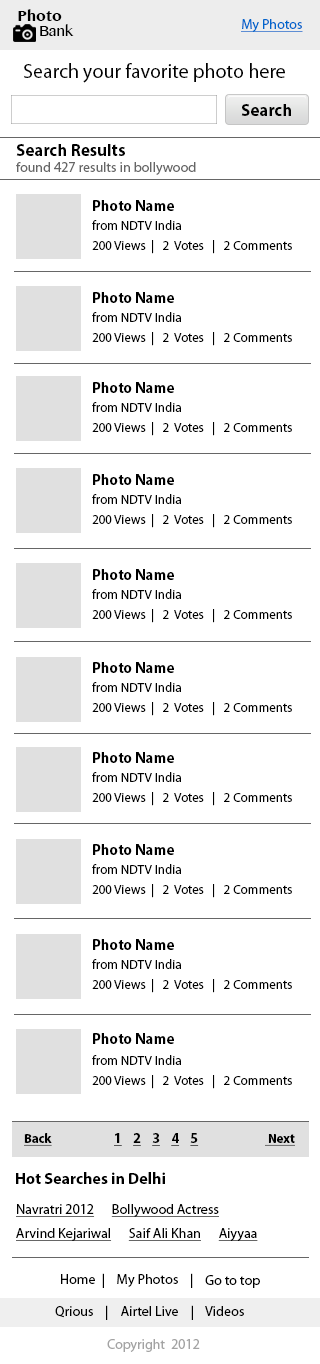
<style>
.page{position:relative;width:320px;height:1364px;background:#ffffff}
.page>*{position:absolute;margin:0}
.t1{font:14.7px/15.5px "TamilMN-Bold";color:#000000}
.t2{font:14.7px/15.5px "TamilMN";color:#000000}
.t3{font:14px "MyriadPro-Regular";color:#0066cc;text-decoration:underline}
.t4{font:20px "MyriadPro-Regular";color:#000000}
.t5{font:17px "MyriadPro-Bold";color:#000000}
.t6{font:14px/16px "MyriadPro-Regular";color:#666666}
.t7{font:17px/20px "MyriadPro-Bold";color:#000000}
.t8{font:15px "MyriadPro-Bold";color:#000000}
.t9{font:13px/20px "MyriadPro-Regular";color:#000000}
.t10{font:13px "MyriadPro-Bold";color:#000000;text-decoration:underline}
.t11{font:14px "MyriadPro-Bold";color:#000000;text-decoration:underline}
.t12{font:16px "MyriadPro-Bold";color:#000000}
.t13{font:14px/24px "MyriadPro-Regular";color:#000000;text-decoration:underline}
.t14{font:14px "MyriadPro-Regular";color:#000000}
.t15{font:14px "MyriadPro-Regular";color:#a3a3a3}
</style>
<div class="page">
<p class="t1" style="left:18px;top:9px;width:56px;height:27px">Photo<br><span class="t2">     Bank</span></p>
<p class="t3" style="left:241px;top:19px;width:62px;height:13px">My Photos</p>
<p class="t4" style="left:24px;top:63px;width:261px;height:20px">Search your favorite photo here</p>
<p class="t5" style="left:241px;top:104px;width:50px;height:12px">Search</p>
<p class="t6" style="left:16px;top:144px;width:180px;height:31px"><span class="t7">Search Results <br></span>found 427 results in bollywood</p>
<p class="t8" style="left:93px;top:200px;width:81px;height:11px">Photo Name</p>
<p class="t9" style="left:92px;top:220px;width:200px;height:34px">from NDTV India<br>200 Views  |   2  Votes   |   2 Comments</p>
<p class="t8" style="left:93px;top:292px;width:81px;height:11px">Photo Name</p>
<p class="t9" style="left:92px;top:312px;width:200px;height:34px">from NDTV India<br>200 Views  |   2  Votes   |   2 Comments</p>
<p class="t8" style="left:93px;top:382px;width:81px;height:11px">Photo Name</p>
<p class="t9" style="left:92px;top:402px;width:200px;height:34px">from NDTV India<br>200 Views  |   2  Votes   |   2 Comments</p>
<p class="t8" style="left:93px;top:474px;width:81px;height:11px">Photo Name</p>
<p class="t9" style="left:92px;top:494px;width:200px;height:34px">from NDTV India<br>200 Views  |   2  Votes   |   2 Comments</p>
<p class="t8" style="left:93px;top:569px;width:81px;height:11px">Photo Name</p>
<p class="t9" style="left:92px;top:589px;width:200px;height:34px">from NDTV India<br>200 Views  |   2  Votes   |   2 Comments</p>
<p class="t8" style="left:93px;top:662px;width:81px;height:11px">Photo Name</p>
<p class="t9" style="left:92px;top:682px;width:200px;height:34px">from NDTV India<br>200 Views  |   2  Votes   |   2 Comments</p>
<p class="t8" style="left:93px;top:752px;width:81px;height:11px">Photo Name</p>
<p class="t9" style="left:92px;top:772px;width:200px;height:34px">from NDTV India<br>200 Views  |   2  Votes   |   2 Comments</p>
<p class="t8" style="left:93px;top:844px;width:81px;height:11px">Photo Name</p>
<p class="t9" style="left:92px;top:864px;width:200px;height:34px">from NDTV India<br>200 Views  |   2  Votes   |   2 Comments</p>
<p class="t8" style="left:93px;top:939px;width:81px;height:11px">Photo Name</p>
<p class="t9" style="left:92px;top:959px;width:200px;height:34px">from NDTV India<br>200 Views  |   2  Votes   |   2 Comments</p>
<p class="t8" style="left:93px;top:1033px;width:81px;height:11px">Photo Name</p>
<p class="t9" style="left:92px;top:1055px;width:200px;height:34px">from NDTV India<br>200 Views  |   2  Votes   |   2 Comments</p>
<p class="t10" style="left:24px;top:1133px;width:28px;height:13px">Back</p>
<p class="t11" style="left:114px;top:1133px;width:85px;height:13px">1    2    3    4    5</p>
<p class="t10" style="left:265px;top:1134px;width:30px;height:12px">Next</p>
<p class="t12" style="left:16px;top:1172px;width:149px;height:12px">Hot Searches in Delhi</p>
<p class="t13" style="left:16px;top:1204px;width:242px;height:37px">Navratri 2012      Bollywood Actress     <br>Arvind Kejariwal      Saif Ali Khan      Aiyyaa</p>
<p class="t14" style="left:61px;top:1273px;width:132px;height:15px">Home  |    My Photos    |</p>
<p class="t14" style="left:205px;top:1275px;width:55px;height:13px">Go to top</p>
<p class="t14" style="left:55px;top:1305px;width:189px;height:15px">Qrious    |    Airtel Live    |    Videos</p>
<p class="t15" style="left:107px;top:1339px;width:93px;height:13px">Copyright  2012</p>
</div>
